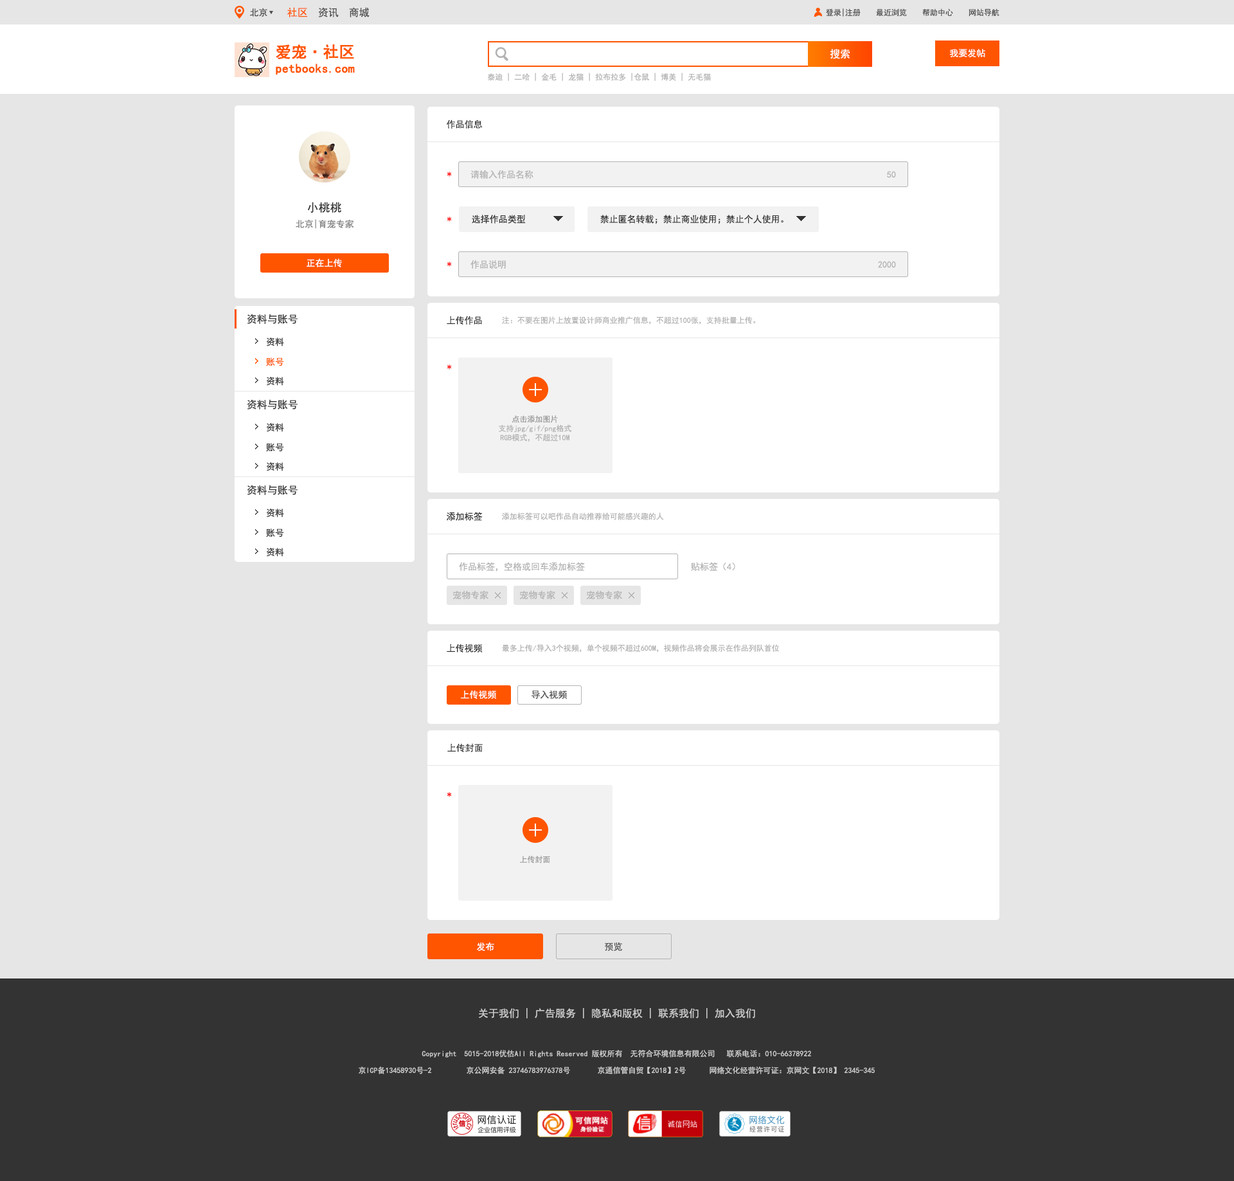
<style>
.page{position:relative;width:1234px;height:1181px;background:#e6e6e6}
.page>*{position:absolute;margin:0}
.t1{font:9px "SimHei";color:#4d4d4d}
.t2{font:10.3px "SimHei";color:#4d4d4d}
.t3{font:10.3px "SimHei";color:#ff5500}
.t4{font:7.7px "SimHei";color:#4d4d4d}
.t5{font:12.5px/15.4px "SimHei";color:#ff5500;font-weight:bold}
.t6{font:15.4px/15.4px "SimHei";color:#ff5500;font-weight:bold}
.t7{font:10.3px "SimHei";color:#ffffff}
.t8{font:9px "SimHei";color:#ffffff}
.t9{font:7.7px "SimHei";color:#b3b3b3}
.t10{font:9px "SimHei";color:#333333}
.t11{font:9px "SimHei";color:#ff0000}
.t12{font:9px "SimHei";color:#b3b3b3}
.t13{font:11.6px "SimHei";color:#333333}
.t14{font:9px "SimHei";color:#808080}
.t15{font:10.3px "SimHei";color:#333333}
.t16{font:9px "SimHei";color:#fe5500}
.t17{font:7.7px "SimHei";color:#999999}
.t18{font:10.3px "SimHei";color:#cccccc}
.t19{font:7.7px/16.7px "SimHei";color:#cccccc}
</style>
<div class="page">
<p class="t1" style="left:250px;top:8px;width:17px;height:9px">北京</p>
<p class="t2" style="left:287px;top:7px;width:83px;height:10px"><span class="t3">社区  </span>资讯  商城</p>
<p class="t4" style="left:826px;top:8px;width:174px;height:9px">登录|注册    最近浏览    帮助中心    网站导航</p>
<p class="t5" style="left:276px;top:44px;width:79px;height:31px"><span class="t6">爱宠·社区<br></span>petbooks.com</p>
<p class="t7" style="left:830px;top:49px;width:21px;height:10px">搜索</p>
<p class="t8" style="left:950px;top:49px;width:36px;height:9px">我要发帖</p>
<p class="t9" style="left:488px;top:73px;width:223px;height:8px">泰迪 | 二哈 | 金毛 | 龙猫 | 拉布拉多 |仓鼠 | 博美 | 无毛猫</p>
<p class="t10" style="left:447px;top:120px;width:36px;height:9px">作品信息</p>
<p class="t11" style="left:447px;top:172px;width:5px;height:5px">*</p>
<p class="t12" style="left:471px;top:170px;width:63px;height:9px">请输入作品名称</p>
<p class="t12" style="left:887px;top:171px;width:9px;height:7px">50</p>
<p class="t13" style="left:308px;top:202px;width:33px;height:11px">小桃桃</p>
<p class="t14" style="left:296px;top:219px;width:58px;height:10px">北京|育宠专家</p>
<p class="t11" style="left:447px;top:217px;width:5px;height:5px">*</p>
<p class="t10" style="left:472px;top:215px;width:54px;height:9px">选择作品类型</p>
<p class="t10" style="left:600px;top:215px;width:184px;height:9px">禁止匿名转载；禁止商业使用；禁止个人使用。</p>
<p class="t8" style="left:307px;top:258px;width:35px;height:9px">正在上传</p>
<p class="t11" style="left:447px;top:262px;width:5px;height:5px">*</p>
<p class="t12" style="left:471px;top:260px;width:35px;height:9px">作品说明</p>
<p class="t12" style="left:878px;top:261px;width:18px;height:7px">2000</p>
<p class="t15" style="left:247px;top:314px;width:51px;height:10px">资料与账号</p>
<p class="t10" style="left:447px;top:316px;width:35px;height:9px">上传作品</p>
<p class="t9" style="left:502px;top:316px;width:254px;height:9px">注：不要在图片上放置设计师商业推广信息，不超过100张，支持批量上传。</p>
<p class="t10" style="left:267px;top:338px;width:17px;height:8px">资料</p>
<p class="t16" style="left:266px;top:357px;width:18px;height:9px">账号</p>
<p class="t11" style="left:447px;top:364px;width:5px;height:6px">*</p>
<p class="t10" style="left:267px;top:377px;width:17px;height:9px">资料</p>
<p class="t15" style="left:247px;top:399px;width:51px;height:11px">资料与账号</p>
<p class="t10" style="left:267px;top:423px;width:17px;height:9px">资料</p>
<p class="t9" style="left:499px;top:415px;width:73px;height:27px;text-align:center"><span class="t17">点击添加图片<br></span>支持jpg/gif/png格式<br>RGB模式，不超过10M</p>
<p class="t10" style="left:266px;top:443px;width:18px;height:9px">账号</p>
<p class="t10" style="left:267px;top:462px;width:17px;height:9px">资料</p>
<p class="t15" style="left:247px;top:485px;width:51px;height:10px">资料与账号</p>
<p class="t10" style="left:267px;top:509px;width:17px;height:9px">资料</p>
<p class="t10" style="left:447px;top:512px;width:36px;height:9px">添加标签</p>
<p class="t9" style="left:502px;top:512px;width:162px;height:8px">添加标签可以吧作品自动推荐给可能感兴趣的人</p>
<p class="t10" style="left:266px;top:528px;width:18px;height:9px">账号</p>
<p class="t10" style="left:267px;top:548px;width:17px;height:9px">资料</p>
<p class="t12" style="left:459px;top:562px;width:126px;height:10px">作品标签，空格或回车添加标签</p>
<p class="t12" style="left:691px;top:562px;width:44px;height:9px">贴标签（4）</p>
<p class="t12" style="left:453px;top:591px;width:36px;height:9px">宠物专家</p>
<p class="t12" style="left:519px;top:591px;width:36px;height:9px">宠物专家</p>
<p class="t12" style="left:586px;top:591px;width:36px;height:9px">宠物专家</p>
<p class="t10" style="left:447px;top:644px;width:36px;height:8px">上传视频</p>
<p class="t9" style="left:502px;top:644px;width:278px;height:8px">最多上传/导入3个视频，单个视频不超过600M，视频作品将会展示在作品列队首位</p>
<p class="t8" style="left:461px;top:690px;width:35px;height:9px">上传视频</p>
<p class="t1" style="left:532px;top:690px;width:35px;height:9px">导入视频</p>
<p class="t10" style="left:447px;top:743px;width:36px;height:9px">上传封面</p>
<p class="t11" style="left:447px;top:792px;width:5px;height:5px">*</p>
<p class="t17" style="left:520px;top:856px;width:30px;height:7px">上传封面</p>
<p class="t8" style="left:477px;top:942px;width:17px;height:9px">发布</p>
<p class="t1" style="left:605px;top:942px;width:17px;height:9px">预览</p>
<p class="t18" style="left:479px;top:1008px;width:276px;height:10px">关于我们 | 广告服务 | 隐私和版权 | 联系我们 | 加入我们</p>
<p class="t19" style="left:359px;top:1050px;width:516px;height:24px;text-align:center">Copyright  5015-2018优估All Rights Reserved 版权所有  无符合环境信息有限公司   联系电话：010-66378922<br>京ICP备13458930号-2         京公网安备 23746783976378号       京通信管自贸【2018】2号      网络文化经营许可证：京网文【2018】 2345-345</p>
</div>
